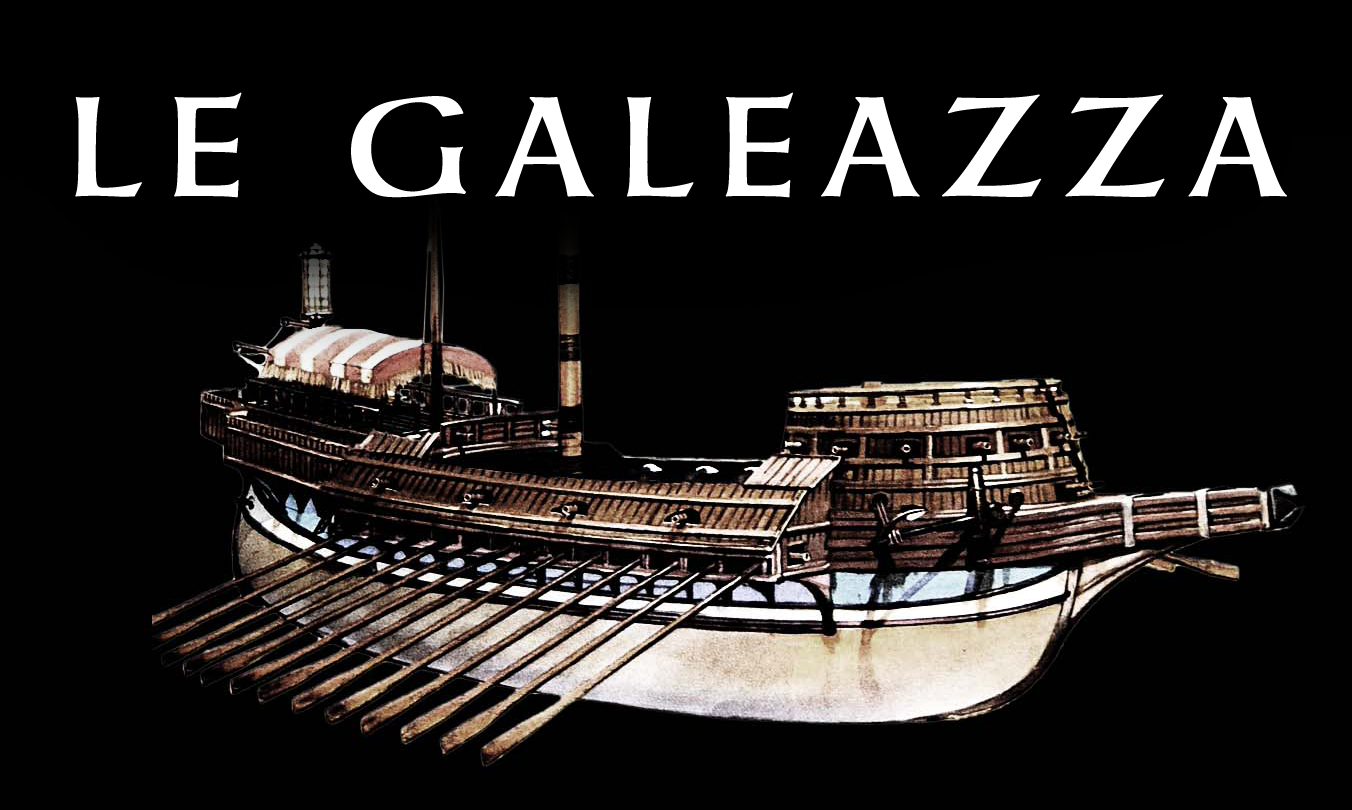
<style>
.page{position:relative;width:1352px;height:810px;background:#010101}
.page>*{position:absolute;margin:0}
.t1{font:140px "NeueHammerUnziale-One";letter-spacing:0.14em;color:#ffffff;text-transform:uppercase}
</style>
<div class="page">
<p class="t1" style="left:75px;top:92px;width:1212px;height:106px">Le Galeazza</p>
</div>
